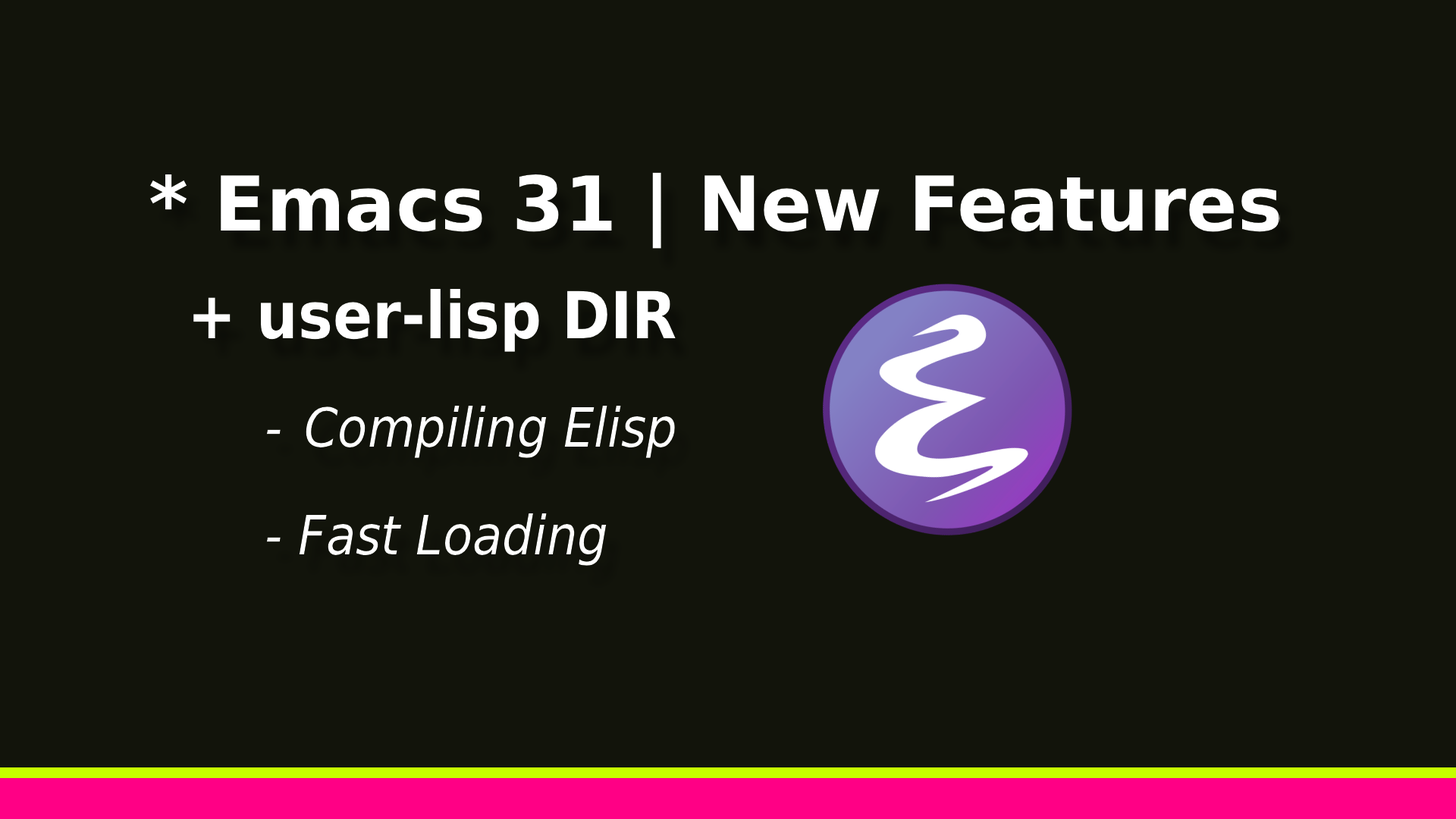
<style>
.page{position:relative;width:1456px;height:819px;background:#12140b}
.page>*{position:absolute;margin:0}
.t1{font:54px/108px "DejaVuSansCondensed-Oblique";color:#ffffff}
.t2{font:75.6px/108px "DejaVuSans-Bold";color:#ffffff}
.t3{font:64.8px/108px "DejaVuSansCondensed-Bold";color:#ffffff}
</style>
<div class="page">
<p class="t1" style="left:150px;top:172px;width:1129px;height:394px"><span class="t2">* Emacs 31 | New Features<br> </span><span class="t3">+ user-lisp DIR<br>      </span>- Compiling Elisp<br>   - Fast Loading</p>
</div>
